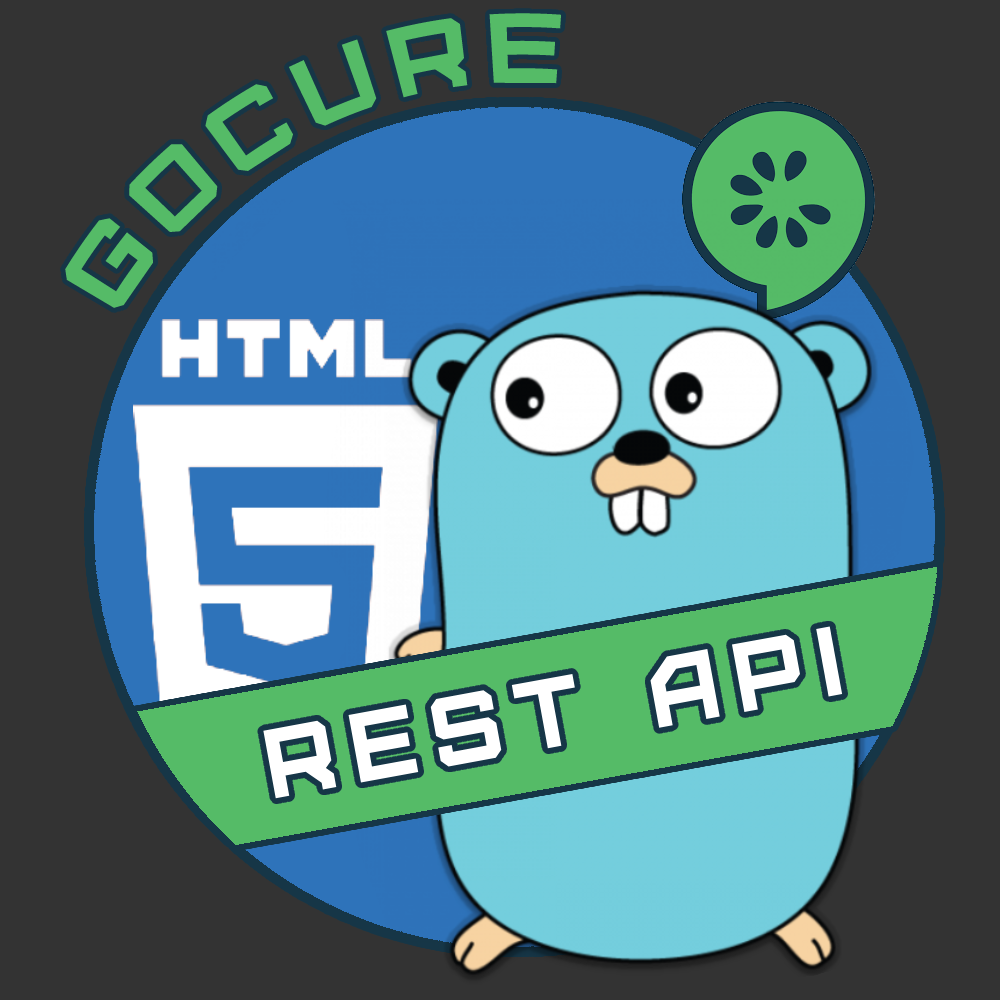
<style>
.page{position:relative;width:1000px;height:1000px;background:#333333}
.page>*{position:absolute;margin:0}
.t1{font:98px "Furore";letter-spacing:0.156em;color:#55bb67}
.t2{font:98px "Furore";letter-spacing:0.156em;color:#ffffff}
</style>
<div class="page">
<p class="t1" style="left:65px;top:13px;width:497px;height:295px;rotate:-27deg">GOCURE</p>
<p class="t2" style="left:263px;top:626px;width:580px;height:173px;rotate:-10deg">Rest api</p>
</div>
